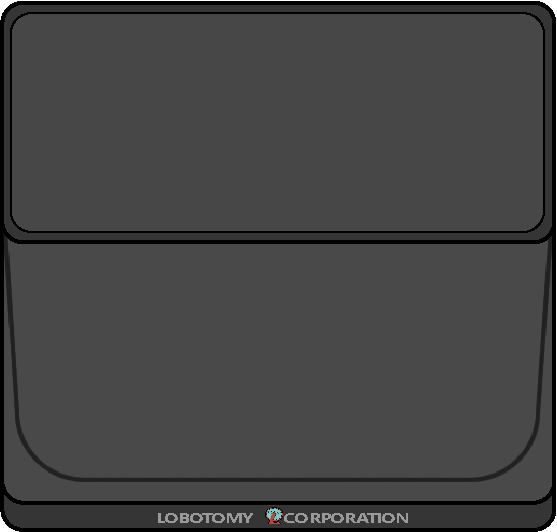
<style>
.page{position:relative;width:557px;height:532px;background:#494949}
.page>*{position:absolute;margin:0}
.t1{font:14.3px "SegoeUIVariable-BoldText";color:#999999;scale:1.31 1}
</style>
<div class="page">
<p class="t1" style="left:158px;top:513px;width:250px;height:10px">LOBOTOMY      CORPORATION</p>
</div>
